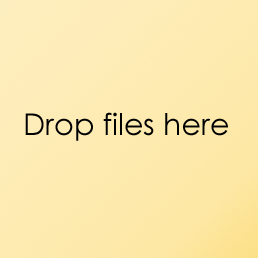
<style>
.page{position:relative;width:258px;height:258px}
.page>*{position:absolute;margin:0}
.t1{font:29.9px "CenturyGothic";color:#000000}
</style>
<div class="page">
<p class="t1" style="left:25px;top:112px;width:203px;height:29px">Drop files here</p>
</div>
